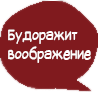
<style>
.page{position:relative;width:98px;height:92px;background:#801a1e}
.page>*{position:absolute;margin:0}
.t1{font:16px "SuplexmentaryComicNC";color:#ffffff;scale:0.8 1}
</style>
<div class="page">
<p class="t1" style="left:8px;top:29px;width:83px;height:34px">Будоражит<br>воображение</p>
</div>
